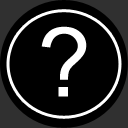
<style>
.page{position:relative;width:128px;height:128px;background:#000000}
.page>*{position:absolute;margin:0}
.t1{font:96px "ArialMT";color:#ffffff}
</style>
<div class="page">
<p class="t1" style="left:41px;top:26px;width:46px;height:71px">?</p>
</div>
